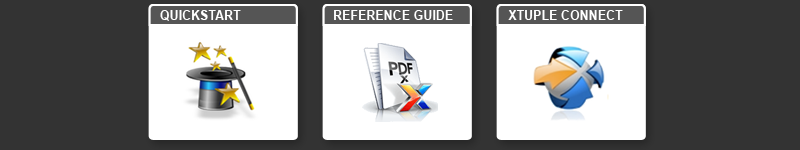
<style>
.page{position:relative;width:800px;height:150px;background:#333333}
.page>*{position:absolute;margin:0}
.t1{font:12.5px "Arial-BoldMT";color:#ffffff}
</style>
<div class="page">
<p class="t1" style="left:160px;top:10px;width:81px;height:11px">QUICKSTART</p>
<p class="t1" style="left:334px;top:10px;width:119px;height:10px">REFERENCE GUIDE</p>
<p class="t1" style="left:508px;top:10px;width:115px;height:10px">XTUPLE CONNECT</p>
</div>
